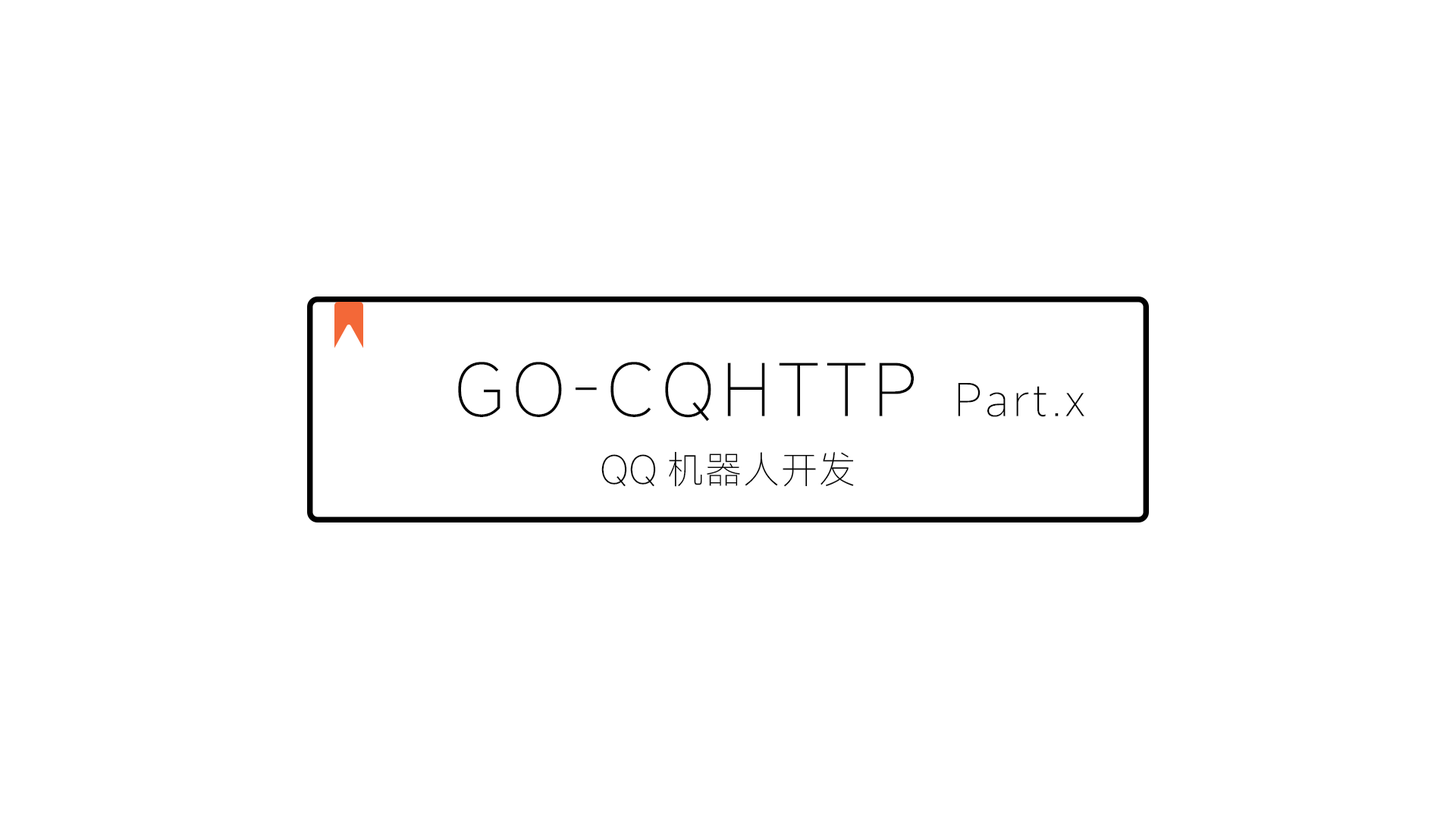
<style>
.page{position:relative;width:1456px;height:819px;background:#ffffff}
.page>*{position:absolute;margin:0}
.t1{font:70.8px "MiSans-ExtraLight";letter-spacing:0.1em;color:#000000}
.t2{font:44.2px "MiSans-ExtraLight";letter-spacing:0.1em;color:#000000}
.t3{font:37.9px "MiSans-ExtraLight";color:#000000}
</style>
<div class="page">
<p class="t1" style="left:458px;top:362px;width:626px;height:60px">GO-CQHTTP <span class="t2">Part.x</span></p>
<p class="t3" style="left:601px;top:451px;width:253px;height:36px">QQ机器人开发</p>
</div>
